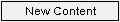
<style>
.page{position:relative;width:120px;height:22px;background:#f1f1f1}
.page>*{position:absolute;margin:0}
.t1{font:10.8px "ArialMT";color:#000000;scale:1.1 1}
</style>
<div class="page">
<p class="t1" style="left:26px;top:7px;width:70px;height:8px">New Content</p>
</div>
